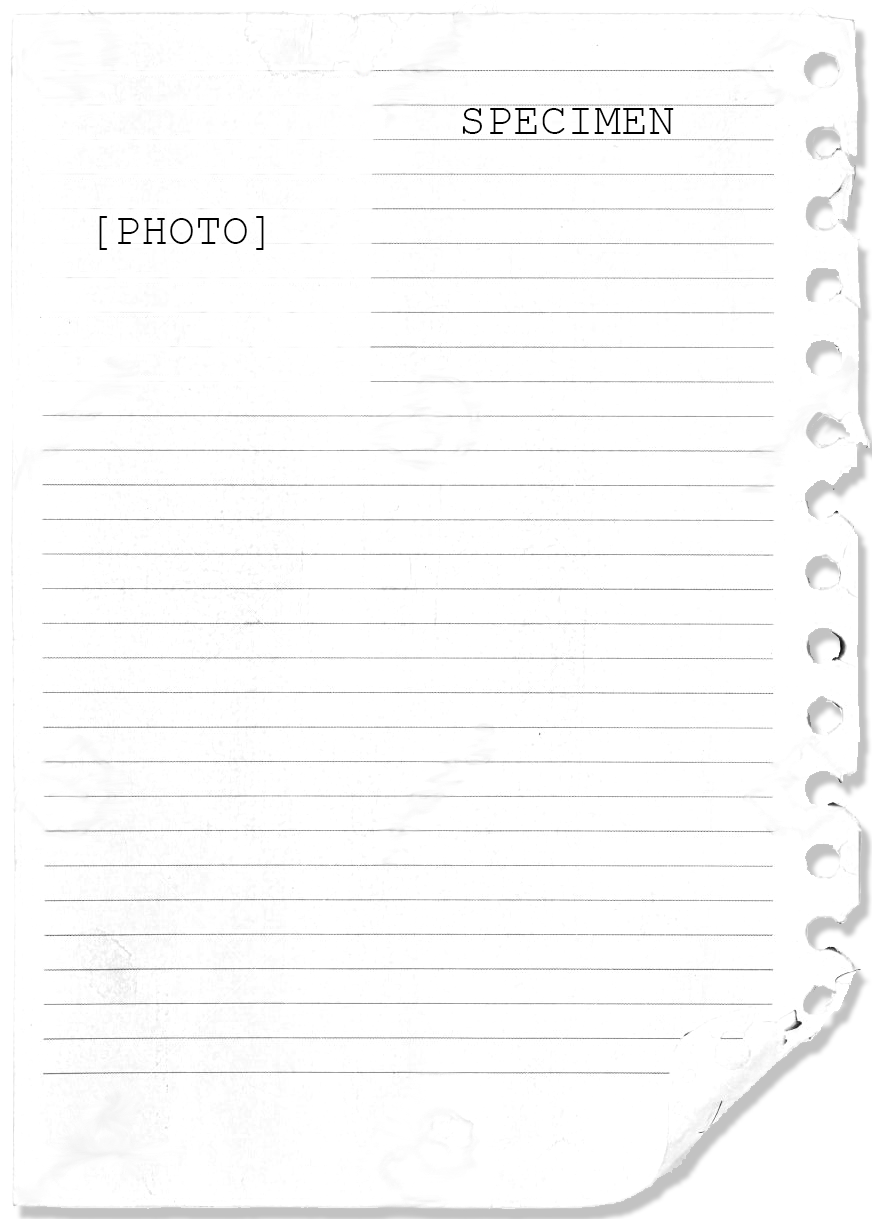
<style>
.page{position:relative;width:872px;height:1219px;background:#ffffff}
.page>*{position:absolute;margin:0}
.t1{font:45px "CourierNewPSMT";color:#000000}
</style>
<div class="page">
<p class="t1" style="left:462px;top:108px;width:212px;height:26px">SPECIMEN</p>
<p class="t1" style="left:99px;top:216px;width:165px;height:34px">[PHOTO]</p>
</div>
